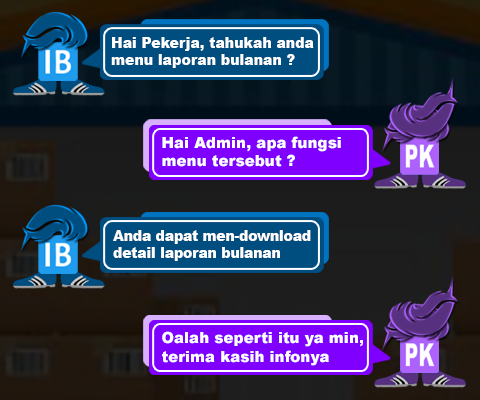
<style>
.page{position:relative;width:480px;height:400px}
.page>*{position:absolute;margin:0}
.t1{font:15.1px/418.4px "Arial-Black";color:#ffffff;scale:0.93 1}
.t2{font:15.2px/420px "Arial-Black";color:#ffffff}
.t3{font:15.2px/419.7px "Arial-Black";color:#ffffff;scale:0.9 1}
</style>
<div class="page">
<p class="t1" style="left:111px;top:37px;width:203px;height:31px">Hai Pekerja, tahukah anda<br>menu laporan bulanan ?</p>
<p class="t2" style="left:162px;top:136px;width:179px;height:31px">Hai Admin, apa fungsi<br>menu tersebut ?</p>
<p class="t3" style="left:113px;top:230px;width:198px;height:31px">Anda dapat men-download<br>detail laporan bulanan</p>
<p class="t2" style="left:162px;top:331px;width:201px;height:35px">Oalah seperti itu ya min,<br>terima kasih infonya</p>
</div>
